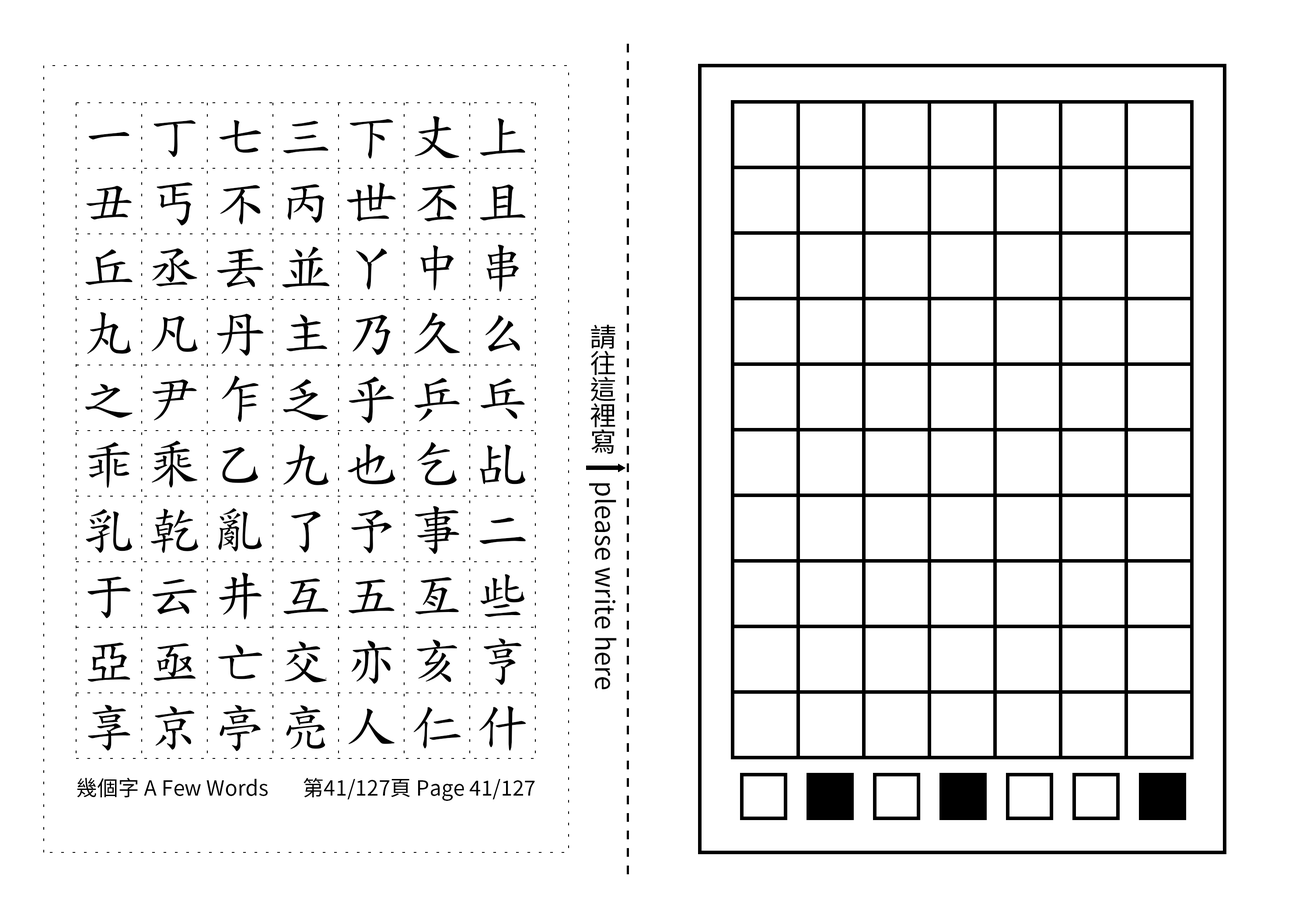
<style>
.page{position:relative;width:1299px;height:918px;background:#ffffff}
.page>*{position:absolute;margin:0}
.t1{font:52.5px/65.6px "TW-Kai-98_1";letter-spacing:0.25em;color:#000000}
.t2{font:26.2px "SourceHanSansTC-Regular";color:#000000}
.t3{font:21px "SourceHanSansTC-Regular";color:#000000}
</style>
<div class="page">
<p class="t1" style="left:85px;top:116px;width:441px;height:636px;text-align:center">一丁七三下丈上丑丐不丙世丕且丘丞丟並丫中串丸凡丹主乃久么之尹乍乏乎乒乓乖乘乙九也乞乩乳乾亂了予事二于云井互五亙些亞亟亡交亦亥亨享京亭亮人仁什</p>
<p class="t2" style="left:589px;top:324px;width:28px;height:366px;text-align:center">請往這裡寫　please write here</p>
<p class="t3" style="left:77px;top:778px;width:191px;height:20px">幾個字 A Few Words</p>
<p class="t3" style="left:303px;top:778px;width:232px;height:23px">第41/127頁 Page 41/127</p>
</div>
